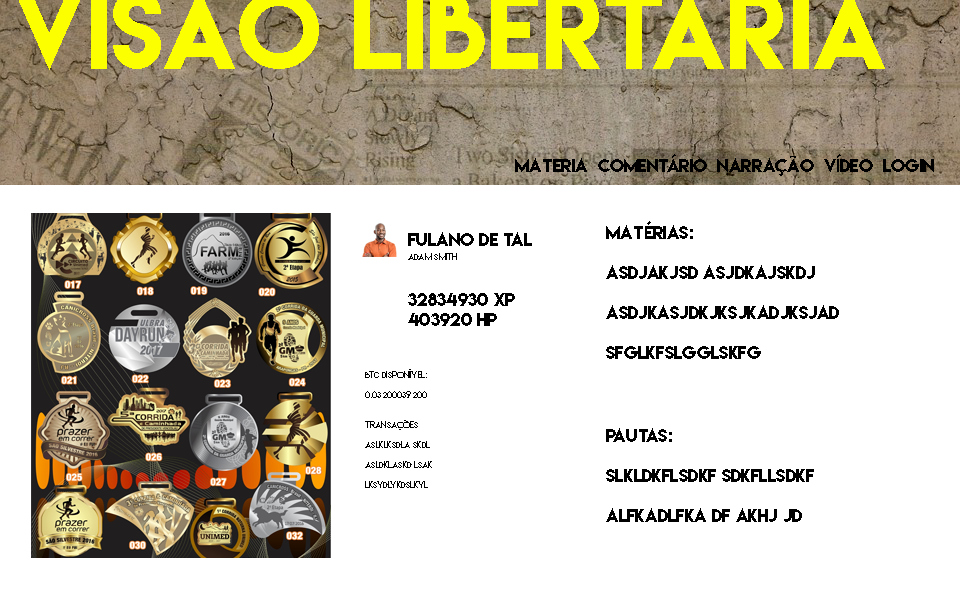
<style>
.page{position:relative;width:960px;height:600px;background:#ffffff}
.page>*{position:absolute;margin:0}
.t1{font:16.7px "LemonMilk";color:#000000}
.t2{font:8.3px "LemonMilk";color:#000000}
</style>
<div class="page">
<p class="t1" style="left:515px;top:154px;width:419px;height:22px">Materia  Comentário  Narração  Vídeo  Login</p>
<p class="t1" style="left:606px;top:221px;width:233px;height:138px">Matérias:<br><br>asdjakjsd asjdkajskdj<br><br>asdjkasjdkjksjkadjksjad<br><br>sfglkfslgglskfg</p>
<p class="t1" style="left:408px;top:232px;width:124px;height:94px">Fulano de tal<br><br><br>32834930 XP<br>403920 HP</p>
<p class="t2" style="left:408px;top:253px;width:49px;height:7px">Adam Smith</p>
<p class="t2" style="left:365px;top:369px;width:67px;height:119px">BTC disponível:<br><br>0.03200039200<br><br><br>Transações<br><br>aslklksdla skdl<br><br>asldklaskd lsak<br><br>lksvdlvkdslkvl</p>
<p class="t1" style="left:606px;top:428px;width:208px;height:94px">Pautas:<br><br>slkldkflsdkf sdkfllsdkf<br><br>alfkadlfka df akhj jd</p>
</div>
